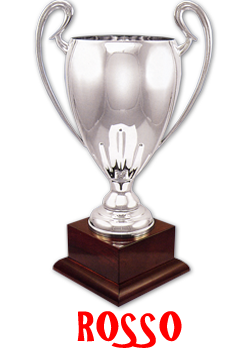
<style>
.page{position:relative;width:250px;height:350px;background:#ffffff}
.page>*{position:absolute;margin:0}
.t1{font:37.5px "ARCHRISTY";color:#ff0000;font-weight:bold}
</style>
<div class="page">
<p class="t1" style="left:77px;top:311px;width:105px;height:37px">ROSSO</p>
</div>
